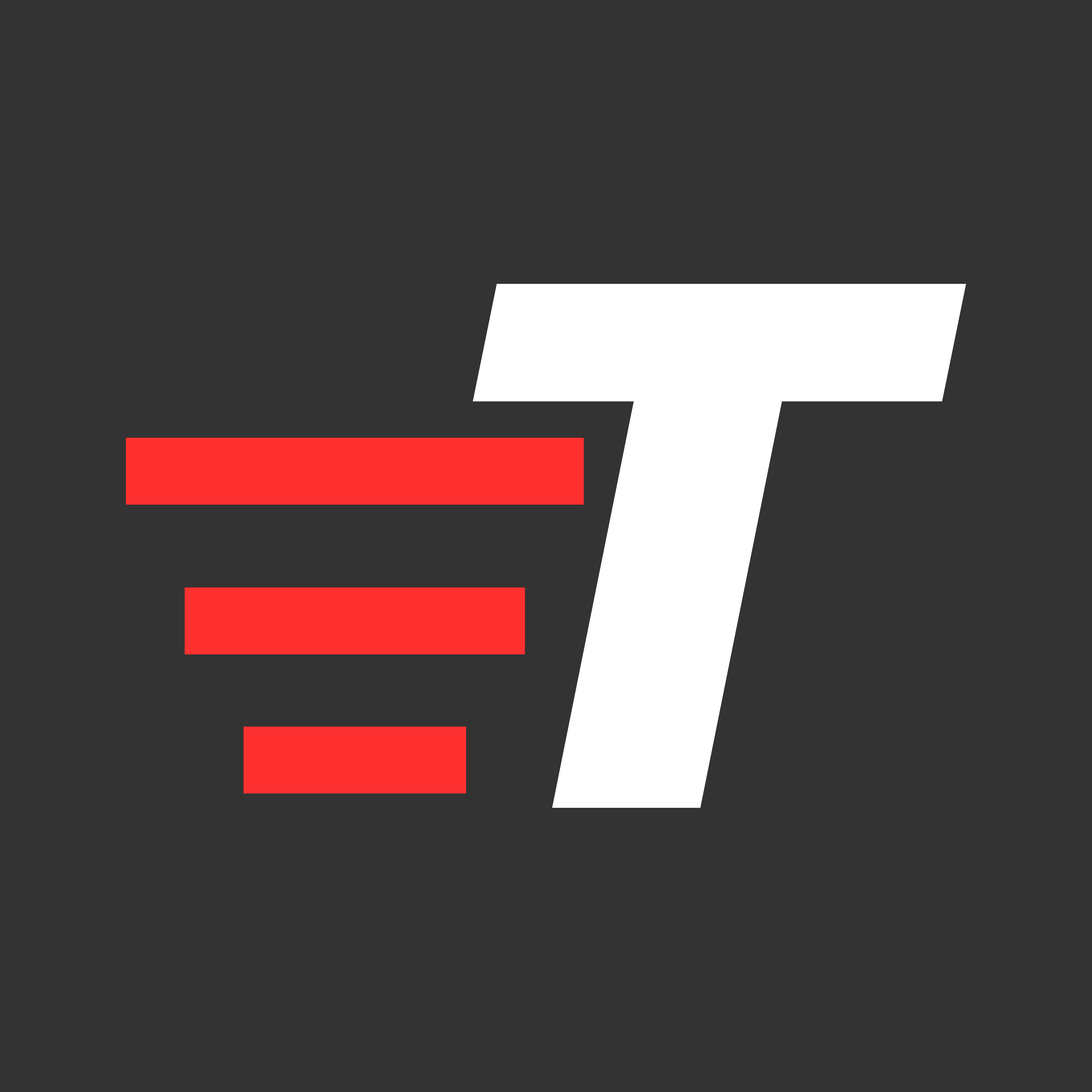
<style>
.page{position:relative;width:1092px;height:1092px;background:#333333}
.page>*{position:absolute;margin:0}
.t1{font:748.5px "Montserrat-ExtraBoldItalic";color:#ffffff}
</style>
<div class="page">
<p class="t1" style="left:473px;top:284px;width:493px;height:524px">T</p>
</div>
